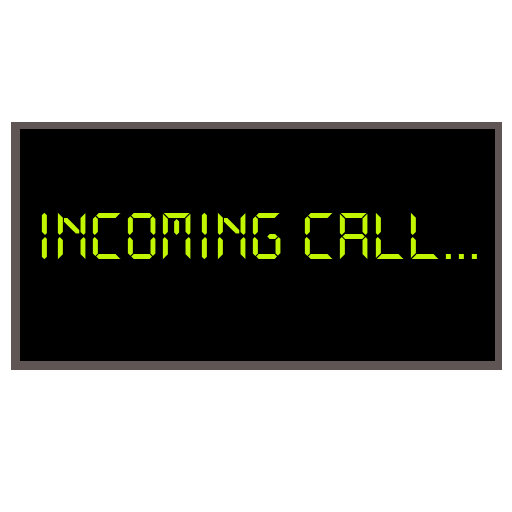
<style>
.page{position:relative;width:512px;height:512px;background:#ffffff}
.page>*{position:absolute;margin:0}
.t1{font:72px "DS-Digital";color:#c1f600}
</style>
<div class="page">
<p class="t1" style="left:41px;top:213px;width:436px;height:46px">INCOMING CALL...</p>
</div>
